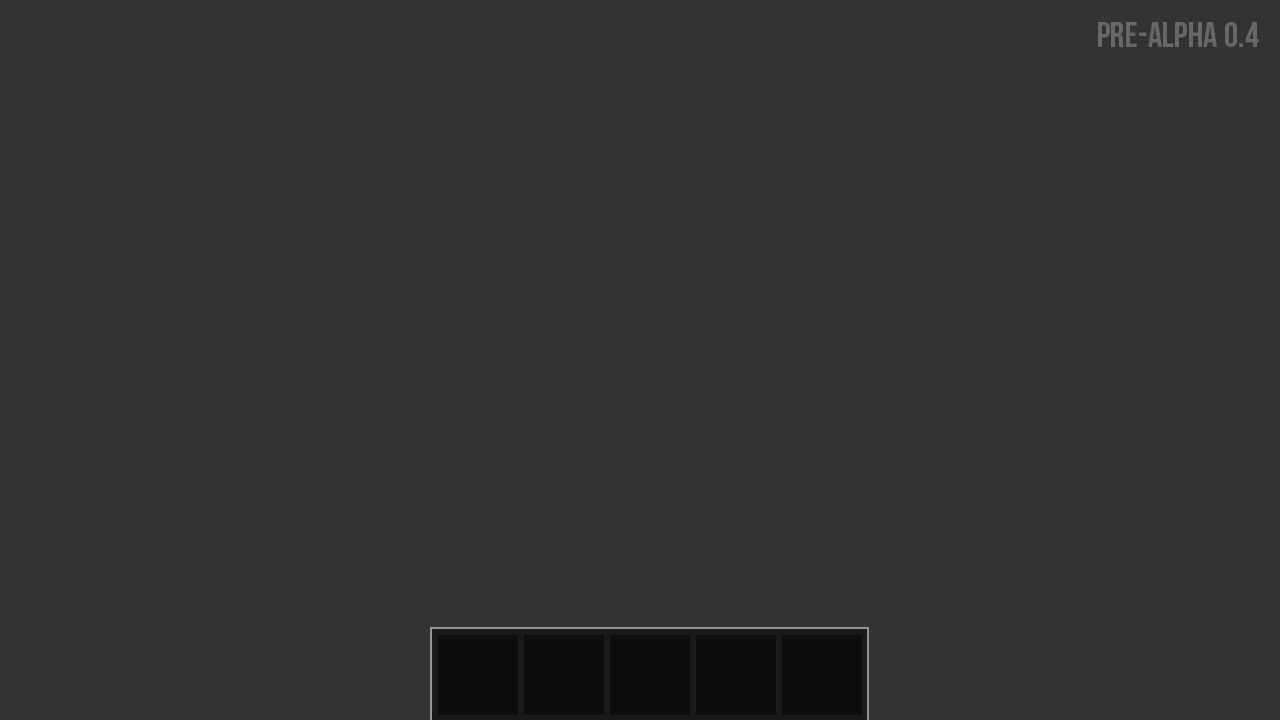
<style>
.page{position:relative;width:1280px;height:720px;background:#333333}
.page>*{position:absolute;margin:0}
.t1{font:36px "BebasNeueBold";color:#676767}
</style>
<div class="page">
<p class="t1" style="left:1098px;top:22px;width:161px;height:25px">Pre-Alpha 0.4</p>
</div>
